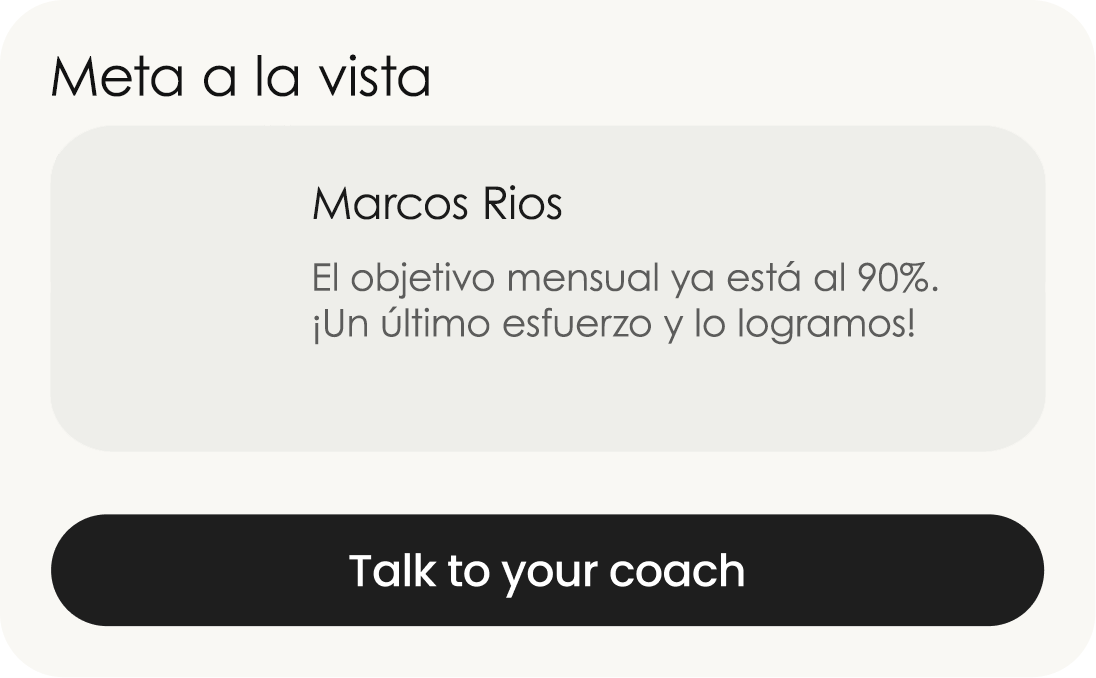
<style>
.page{position:relative;width:1096px;height:678px;background:#f9f8f4}
.page>*{position:absolute;margin:0}
.t1{font:55px "CenturyGothic";color:#121212}
.t2{font:45px "CenturyGothic";color:#1a1a1a}
.t3{font:38px "CenturyGothic";color:#5c5c5b}
</style>
<div class="page">
<p class="t1" style="left:52px;top:54px;width:377px;height:43px">Meta a la vista</p>
<p class="t2" style="left:313px;top:185px;width:249px;height:35px">Marcos Rios</p>
<p class="t3" style="left:314px;top:261px;width:624px;height:84px;text-align:justify">El objetivo mensual ya está al 90%.<br>¡Un último esfuerzo y lo logramos!</p>
</div>
